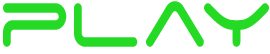
<style>
.page{position:relative;width:270px;height:54px;background:#ffffff}
.page>*{position:absolute;margin:0}
.t1{font:99.6px "SpaceAge";color:#25da25;scale:0.81 1}
</style>
<div class="page">
<p class="t1" style="left:3px;top:1px;width:266px;height:46px">play</p>
</div>
